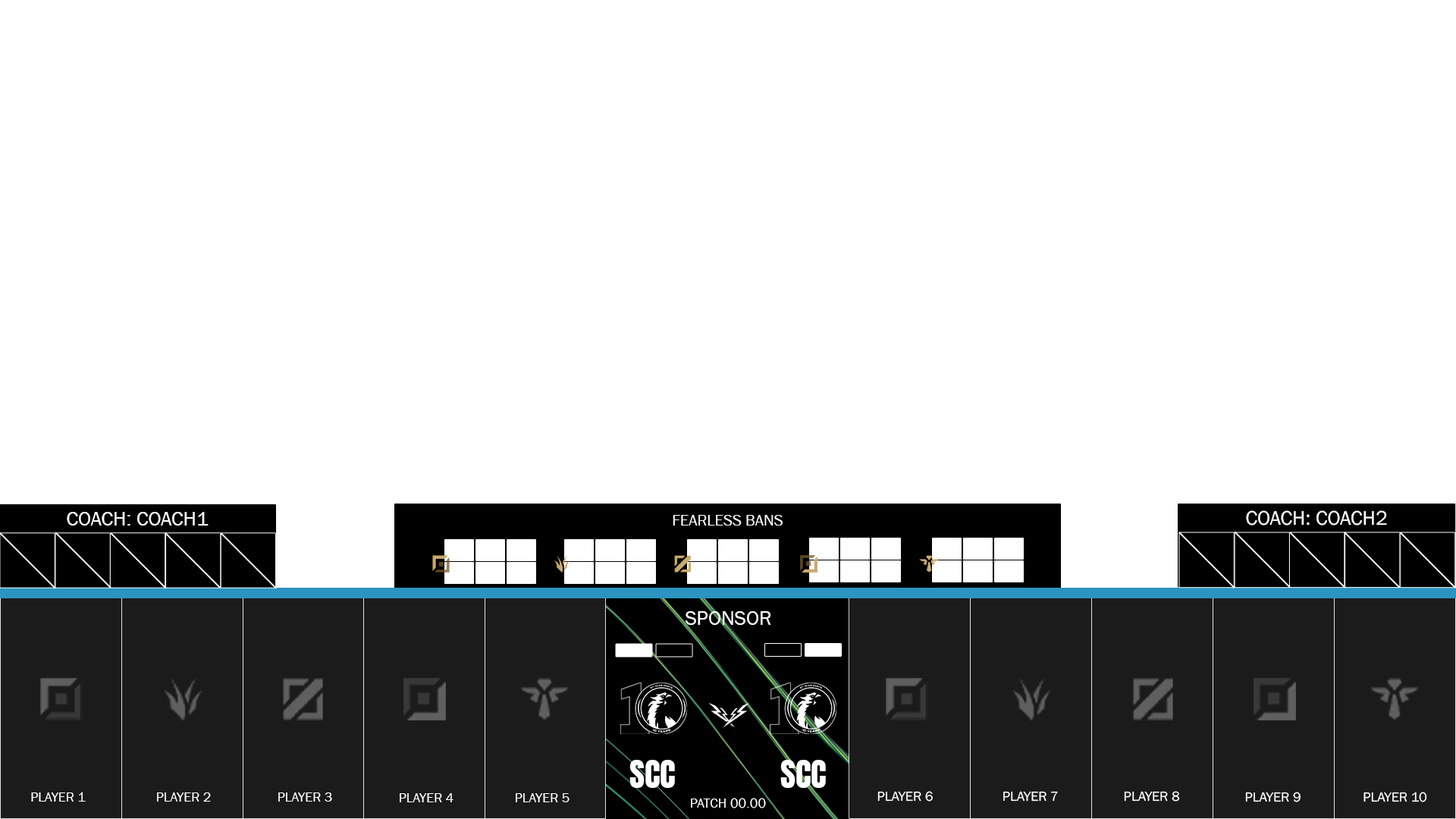
<style>
.page{position:relative;width:1456px;height:819px;background:#ffffff}
.page>*{position:absolute;margin:0}
.t1{font:20.5px "FranklinGothic-Book";color:#ffffff}
.t2{font:15.9px "FranklinGothic-Book";color:#ffffff}
.t3{font:20.6px "FranklinGothic-Book";color:#ffffff}
.t4{font:32.9px "Anton-Regular";color:#ffffff}
.t5{font:13.6px "FranklinGothic-Book";color:#ffffff}
.t6{font:13.8px "FranklinGothic-Book";color:#ffffff}
</style>
<div class="page">
<p class="t1" style="left:67px;top:512px;width:142px;height:14px">COACH: COACH1</p>
<p class="t2" style="left:673px;top:515px;width:110px;height:11px">FEARLESS BANS</p>
<p class="t3" style="left:1246px;top:510px;width:141px;height:16px">COACH: COACH2</p>
<p class="t1" style="left:685px;top:611px;width:86px;height:14px">SPONSOR</p>
<p class="t4" style="left:629px;top:760px;width:46px;height:28px">SCC</p>
<p class="t4" style="left:780px;top:760px;width:46px;height:28px">SCC</p>
<p class="t5" style="left:31px;top:792px;width:55px;height:10px">PLAYER 1</p>
<p class="t5" style="left:157px;top:792px;width:54px;height:10px">PLAYER 2</p>
<p class="t5" style="left:278px;top:792px;width:54px;height:10px">PLAYER 3</p>
<p class="t5" style="left:400px;top:793px;width:53px;height:9px">PLAYER 4</p>
<p class="t5" style="left:516px;top:793px;width:54px;height:9px">PLAYER 5</p>
<p class="t6" style="left:691px;top:798px;width:75px;height:10px">PATCH 00.00</p>
<p class="t5" style="left:877px;top:791px;width:56px;height:11px">PLAYER 6</p>
<p class="t5" style="left:1003px;top:791px;width:55px;height:11px">PLAYER 7</p>
<p class="t5" style="left:1124px;top:791px;width:56px;height:11px">PLAYER 8</p>
<p class="t5" style="left:1245px;top:792px;width:56px;height:10px">PLAYER 9</p>
<p class="t5" style="left:1363px;top:792px;width:64px;height:10px">PLAYER 10</p>
</div>
